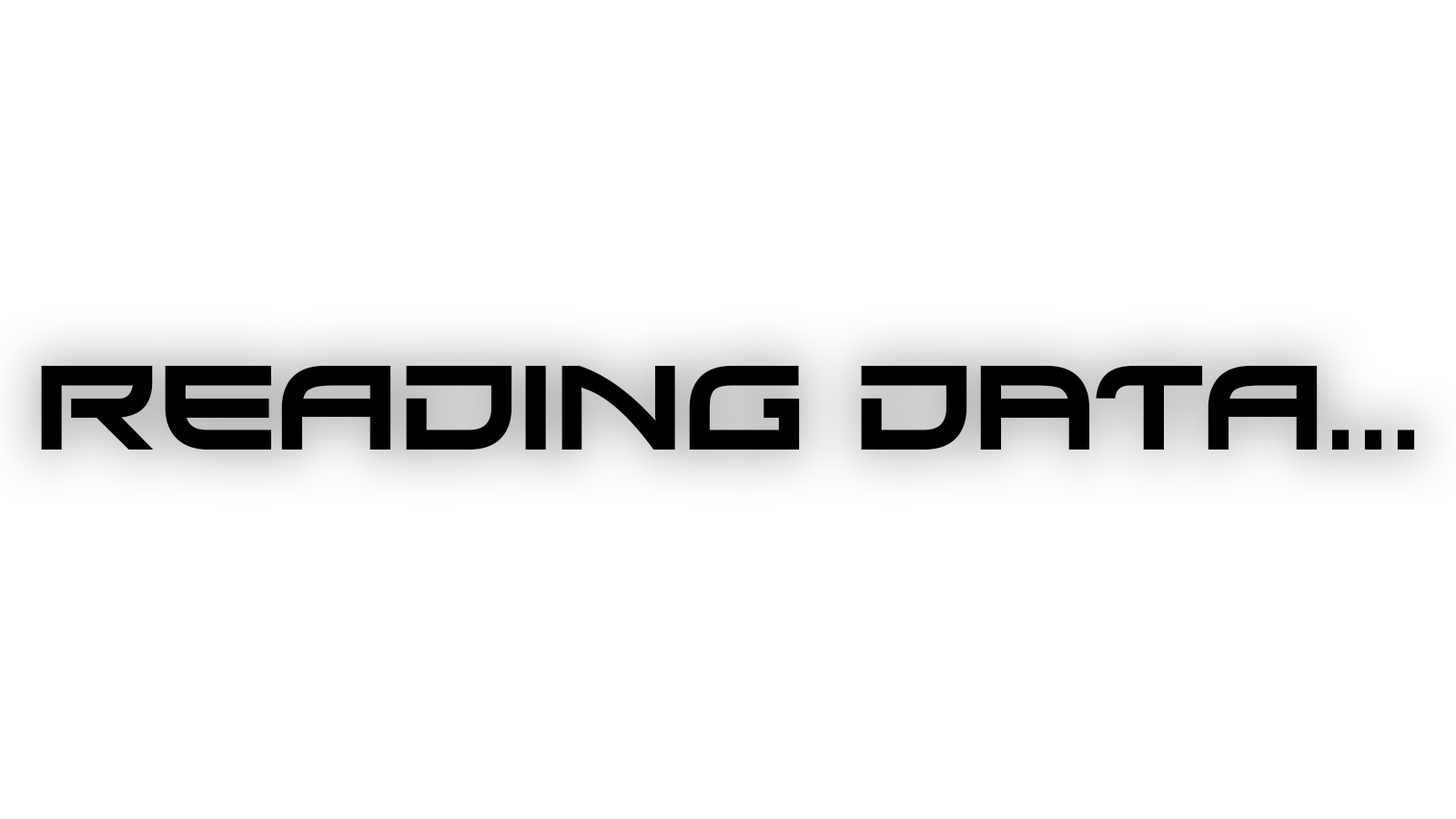
<style>
.page{position:relative;width:1456px;height:819px;background:#ffffff}
.page>*{position:absolute;margin:0}
.t1{font:118.8px "Xirod-Regular";color:#000000}
</style>
<div class="page">
<p class="t1" style="left:41px;top:366px;width:1374px;height:84px">Reading Data...</p>
</div>
